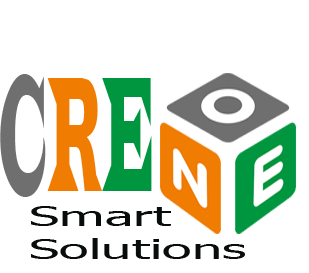
<style>
.page{position:relative;width:309px;height:273px;background:#ffffff}
.page>*{position:absolute;margin:0}
.t1{font:170px "LatinWide";color:#6f6f6f;scale:0.22 1}
.t2{font:170px "LatinWide";color:#f07c01;scale:0.22 1}
.t3{font:170px "LatinWide";color:#00963f;scale:0.22 1}
.t4{font:27.3px "Tahoma";color:#080c0a;scale:1.99 1}
</style>
<div class="page">
<p class="t1" style="left:0px;top:74px;width:152px;height:123px">C<span class="t2">R</span><span class="t3">E</span></p>
<p class="t4" style="left:31px;top:206px;width:214px;height:53px">Smart <br>Solutions</p>
</div>
